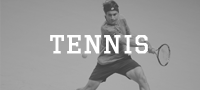
<style>
.page{position:relative;width:200px;height:90px}
.page>*{position:absolute;margin:0}
.t1{font:26px "OctinSportsRg-Regular";letter-spacing:0.06em;color:#ffffff;font-weight:bold}
</style>
<div class="page">
<p class="t1" style="left:50px;top:35px;width:98px;height:19px">Tennis</p>
</div>
